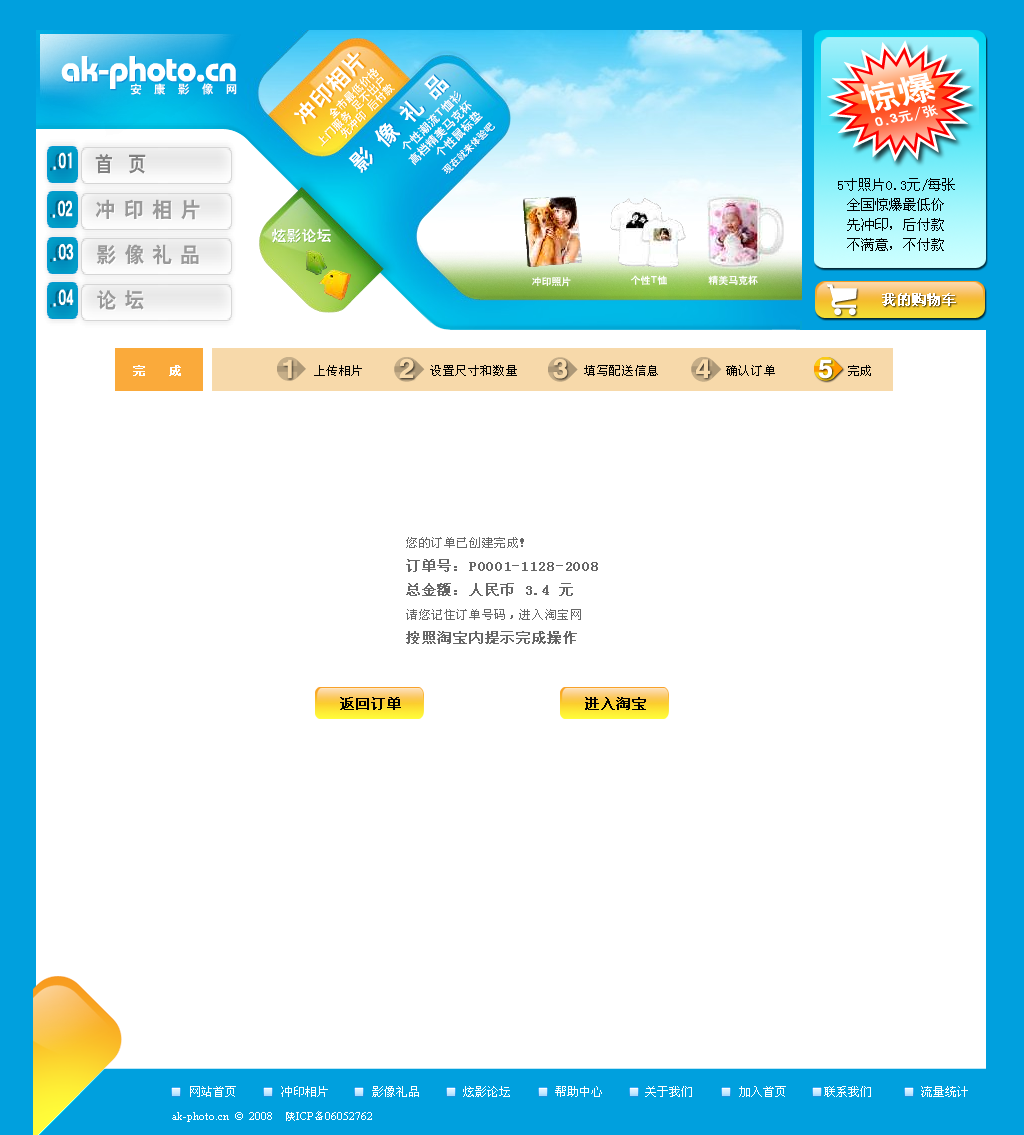
<style>
.page{position:relative;width:1024px;height:1135px;background:#ffffff}
.page>*{position:absolute;margin:0}
.t1{font:14px/20px "SimSun";color:#000000}
.t2{font:14px "SimSun";color:#ffffff;font-weight:bold}
.t3{font:12px "SimSun";letter-spacing:0.05em;color:#ffffff;font-weight:bold}
.t4{font:12px "SimSun";letter-spacing:0.05em;color:#000000}
.t5{font:14px/24px "SimSun";letter-spacing:0.05em;color:#666666;font-weight:bold}
.t6{font:12px/24px "SimSun";letter-spacing:0.05em;color:#666666}
.t7{font:14.2px "SimSun";letter-spacing:0.05em;color:#000000;font-weight:bold}
.t8{font:12px "SimSun";color:#ffffff}
.t9{font:11px "TimesNewRomanPSMT";color:#ffffff}
.t10{font:11px "TimesNewRomanPSMT";color:#ffffff;text-transform:uppercase}
.t11{font:11px "SimSun";color:#ffffff;text-transform:uppercase}
</style>
<div class="page">
<p class="t1" style="left:838px;top:178px;width:117px;height:73px;text-align:center">5寸照片0.3元/每张<br>全国惊爆最低价<br>先冲印，后付款<br>不满意，不付款</p>
<p class="t2" style="left:882px;top:293px;width:74px;height:13px">我的购物车</p>
<p class="t3" style="left:133px;top:365px;width:48px;height:11px">完   成</p>
<p class="t4" style="left:314px;top:365px;width:557px;height:11px">上传相片          设置尺寸和数量          填写配送信息          确认订单           完成</p>
<p class="t5" style="left:406px;top:537px;width:192px;height:107px"><span class="t6">您的订单已创建完成！<br></span>订单号：P0001-1128-2008<br>总金额：人民币 3.4 元<span class="t6"><br>请您记住订单号码，进入淘宝网<br></span>按照淘宝内提示完成操作</p>
<p class="t7" style="left:340px;top:697px;width:61px;height:13px">返回订单</p>
<p class="t7" style="left:585px;top:697px;width:61px;height:13px">进入淘宝</p>
<p class="t8" style="left:190px;top:1086px;width:46px;height:11px">网站首页</p>
<p class="t8" style="left:281px;top:1086px;width:47px;height:11px">冲印相片</p>
<p class="t8" style="left:372px;top:1086px;width:47px;height:11px">影像礼品</p>
<p class="t8" style="left:463px;top:1086px;width:47px;height:11px">炫影论坛</p>
<p class="t8" style="left:555px;top:1086px;width:47px;height:11px">帮助中心</p>
<p class="t8" style="left:645px;top:1086px;width:47px;height:11px">关于我们</p>
<p class="t8" style="left:739px;top:1086px;width:47px;height:11px">加入首页</p>
<p class="t8" style="left:824px;top:1086px;width:47px;height:11px">联系我们</p>
<p class="t8" style="left:921px;top:1086px;width:47px;height:11px">流量统计</p>
<p class="t9" style="left:172px;top:1111px;width:200px;height:11px">ak-photo.cn <span class="t10"> ©  2008    </span><span class="t11">陕</span><span class="t10">ICP</span><span class="t11">备</span><span class="t10">06052762</span></p>
</div>
